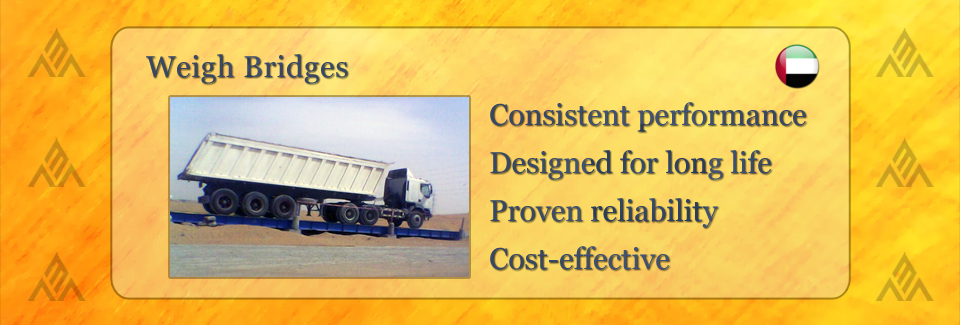
<style>
.page{position:relative;width:960px;height:325px}
.page>*{position:absolute;margin:0}
.t1{font:30px "Georgia";letter-spacing:0.025em;color:#364866}
.t2{font:30px/48px "Georgia";color:#374969}
</style>
<div class="page">
<p class="t1" style="left:146px;top:54px;width:202px;height:30px">Weigh Bridges</p>
<p class="t2" style="left:490px;top:102px;width:316px;height:168px">Consistent performance<br>Designed for long life<br>Proven reliability<br>Cost-effective</p>
</div>
